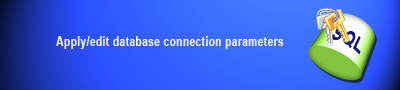
<style>
.page{position:relative;width:400px;height:90px}
.page>*{position:absolute;margin:0}
.t1{font:19.6px "Arial-BoldMT";letter-spacing:0.05em;color:#121777;scale:0.77 1}
.t2{font:13px "Arial-BoldMT";letter-spacing:0.05em;color:#f5f6f9;scale:0.77 1}
</style>
<div class="page">
<p class="t1" style="left:331px;top:27px;width:30px;height:28px;rotate:28deg">SQL</p>
<p class="t2" style="left:56px;top:36px;width:228px;height:13px">Apply/edit database connection parameters</p>
</div>
